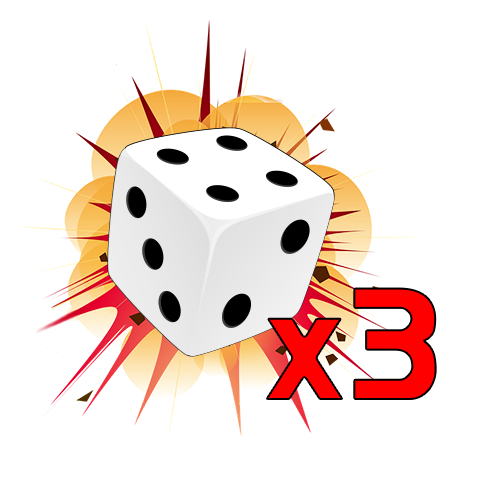
<style>
.page{position:relative;width:500px;height:500px;background:#ffffff}
.page>*{position:absolute;margin:0}
.t1{font:154.3px "Prototype";color:#ff0000}
</style>
<div class="page">
<p class="t1" style="left:267px;top:288px;width:169px;height:111px">x3</p>
</div>
